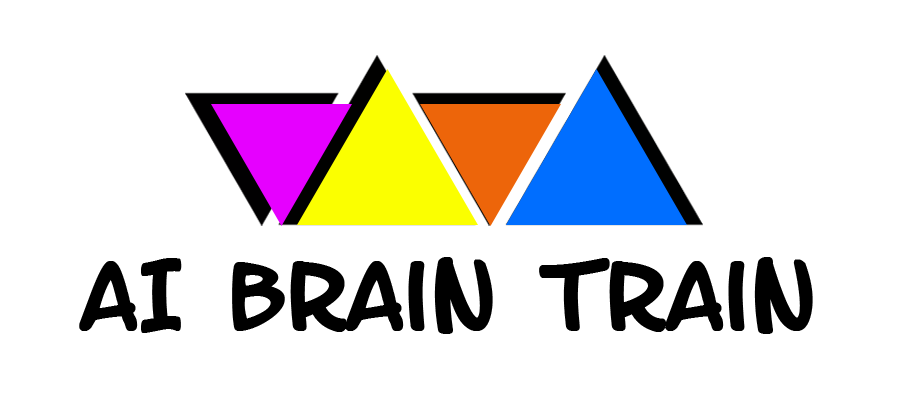
<style>
.page{position:relative;width:899px;height:405px;background:#ffffff}
.page>*{position:absolute;margin:0}
.t1{font:80px "LetterOMatic";color:#000000;font-weight:bold}
</style>
<div class="page">
<p class="t1" style="left:79px;top:257px;width:734px;height:77px">AI Brain train</p>
</div>
